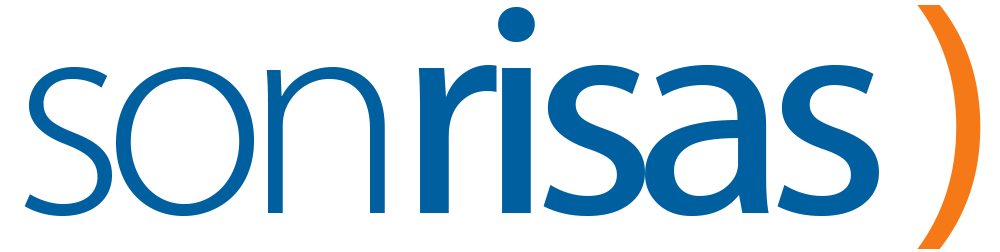
<style>
.page{position:relative;width:1000px;height:252px;background:#ffffff}
.page>*{position:absolute;margin:0}
.t1{font:298.7px "MyriadWebPro";letter-spacing:-0.075em;color:#005f9f;scale:1.03 1}
.t2{font:298.7px "MyriadPro-Light";letter-spacing:-0.075em;color:#005f9f;scale:1.03 1}
.t3{font:298.7px "MyriadPro-Light";letter-spacing:-0.033em;color:#005f9f;scale:1.03 1}
.t4{font:298.7px "MyriadWebPro";letter-spacing:-0.075em;color:#f57917;scale:1.03 1}
</style>
<div class="page">
<p class="t1" style="left:24px;top:5px;width:957px;height:244px"><span class="t2">so</span><span class="t3">n</span>risas <span class="t4">)</span></p>
</div>
